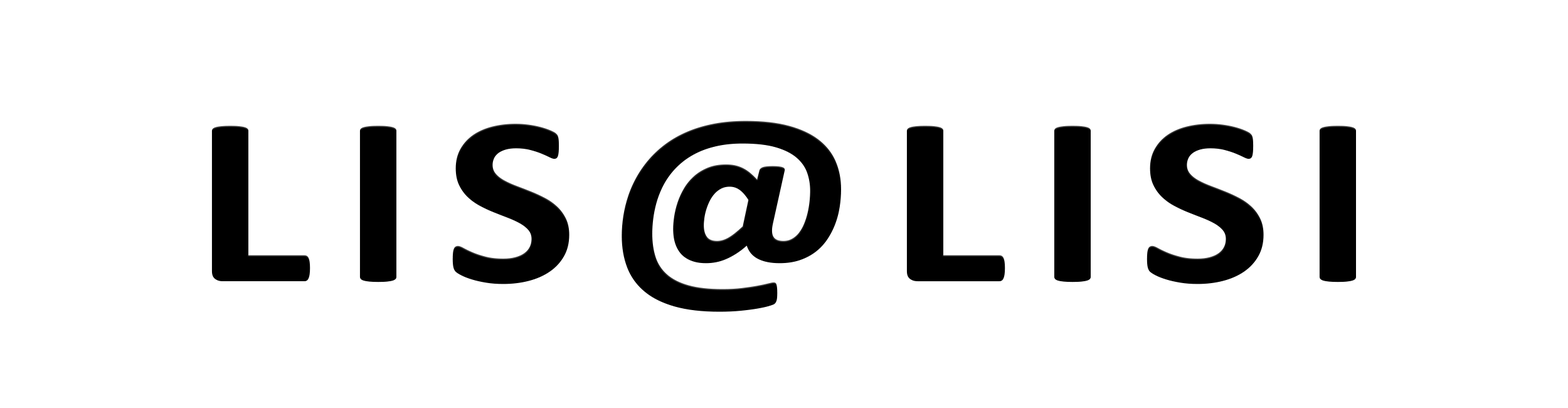
<style>
.page{position:relative;width:1568px;height:408px;background:#ffffff}
.page>*{position:absolute;margin:0}
.t1{font:244.6px "Calibri-Bold";letter-spacing:0.1em;color:#000000;scale:1.15 1}
</style>
<div class="page">
<p class="t1" style="left:211px;top:120px;width:1145px;height:192px">LIS@LISI</p>
</div>
